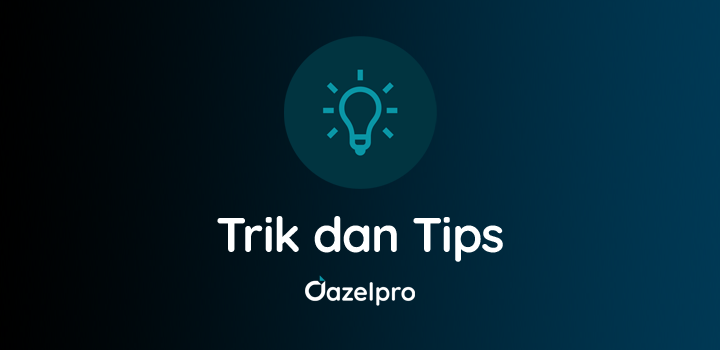
<style>
.page{position:relative;width:720px;height:350px}
.page>*{position:absolute;margin:0}
.t1{font:48.7px "Quicksand-Bold";letter-spacing:-0.02em;color:#ffffff}
</style>
<div class="page">
<p class="t1" style="left:217px;top:216px;width:286px;height:46px">Trik dan Tips</p>
</div>
